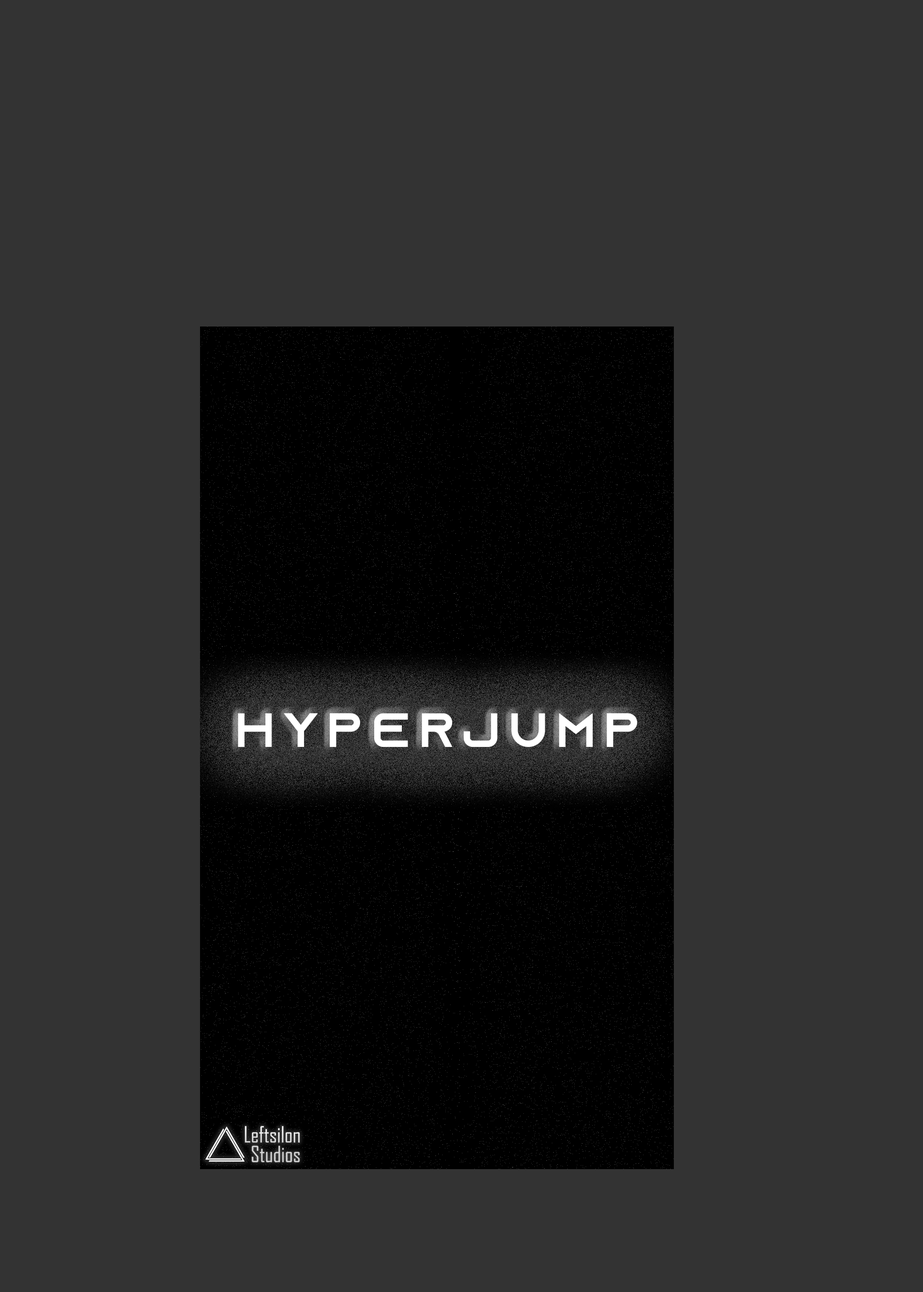
<style>
.page{position:relative;width:923px;height:1292px;background:#333333}
.page>*{position:absolute;margin:0}
.t1{font:47.4px "AzonixRegular";letter-spacing:0.18em;color:#ffffff;text-transform:uppercase;font-weight:bold}
</style>
<div class="page">
<p class="t1" style="left:238px;top:713px;width:400px;height:34px">hyperjump</p>
</div>
